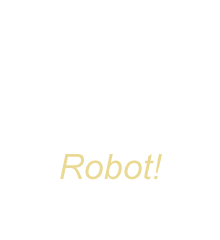
<style>
.page{position:relative;width:220px;height:240px;background:#ffffff}
.page>*{position:absolute;margin:0}
.t1{font:35px "Arial-ItalicMT";color:#ead992}
</style>
<div class="page">
<p class="t1" style="left:60px;top:154px;width:102px;height:26px">Robot!</p>
</div>
